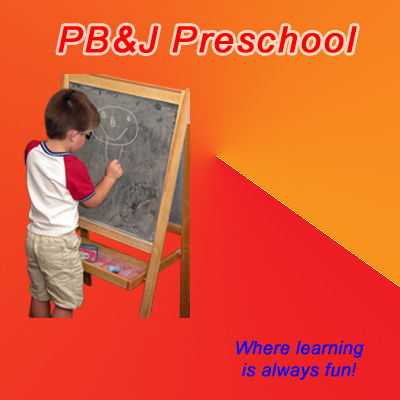
<style>
.page{position:relative;width:400px;height:400px}
.page>*{position:absolute;margin:0}
.t1{font:36px "Arial-ItalicMT";letter-spacing:0.05em;color:#fc0600;font-weight:bold}
.t2{font:18px "Arial-ItalicMT";color:#080afa;font-weight:bold}
</style>
<div class="page">
<p class="t1" style="left:58px;top:25px;width:299px;height:28px">PB&amp;J Preschool</p>
<p class="t2" style="left:236px;top:341px;width:128px;height:39px;text-align:center">Where learning<br>is always fun!</p>
</div>
